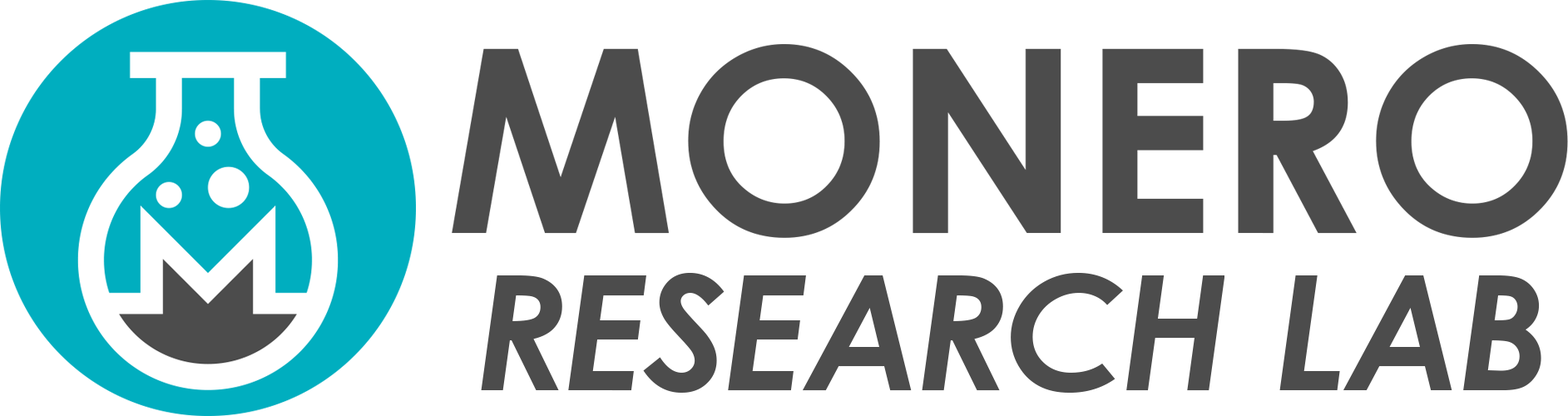
<style>
.page{position:relative;width:1568px;height:416px;background:#ffffff}
.page>*{position:absolute;margin:0}
.t1{font:159.4px "CenturyGothic-BoldItalic";color:#4c4c4c}
</style>
<div class="page">
<p class="t1" style="left:481px;top:273px;width:1060px;height:120px">RESEARCH LAB</p>
</div>
